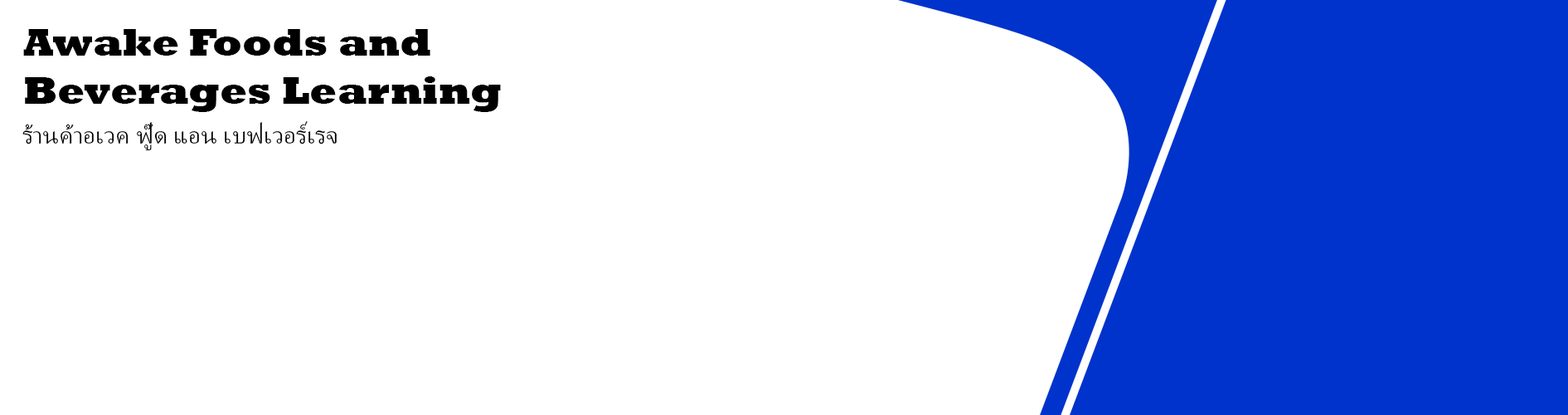
<style>
.page{position:relative;width:1568px;height:415px;background:#ffffff}
.page>*{position:absolute;margin:0}
.t1{font:39.8px "Rockwell-ExtraBold";color:#000000}
.t2{font:29.9px "AdobeThai-Regular";color:#000000}
</style>
<div class="page">
<p class="t1" style="left:23px;top:29px;width:478px;height:83px">Awake Foods and <br>Beverages Learning</p>
<p class="t2" style="left:22px;top:121px;width:315px;height:30px">ร้านค้าอเวค ฟู๊ด แอน เบฟเวอร์เรจ</p>
</div>
